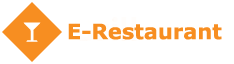
<style>
.page{position:relative;width:234px;height:64px;background:#ffffff}
.page>*{position:absolute;margin:0}
.t1{font:21px "Verdana-Bold";color:#f78e21}
</style>
<div class="page">
<p class="t1" style="left:68px;top:23px;width:154px;height:17px">E-Restaurant</p>
</div>
